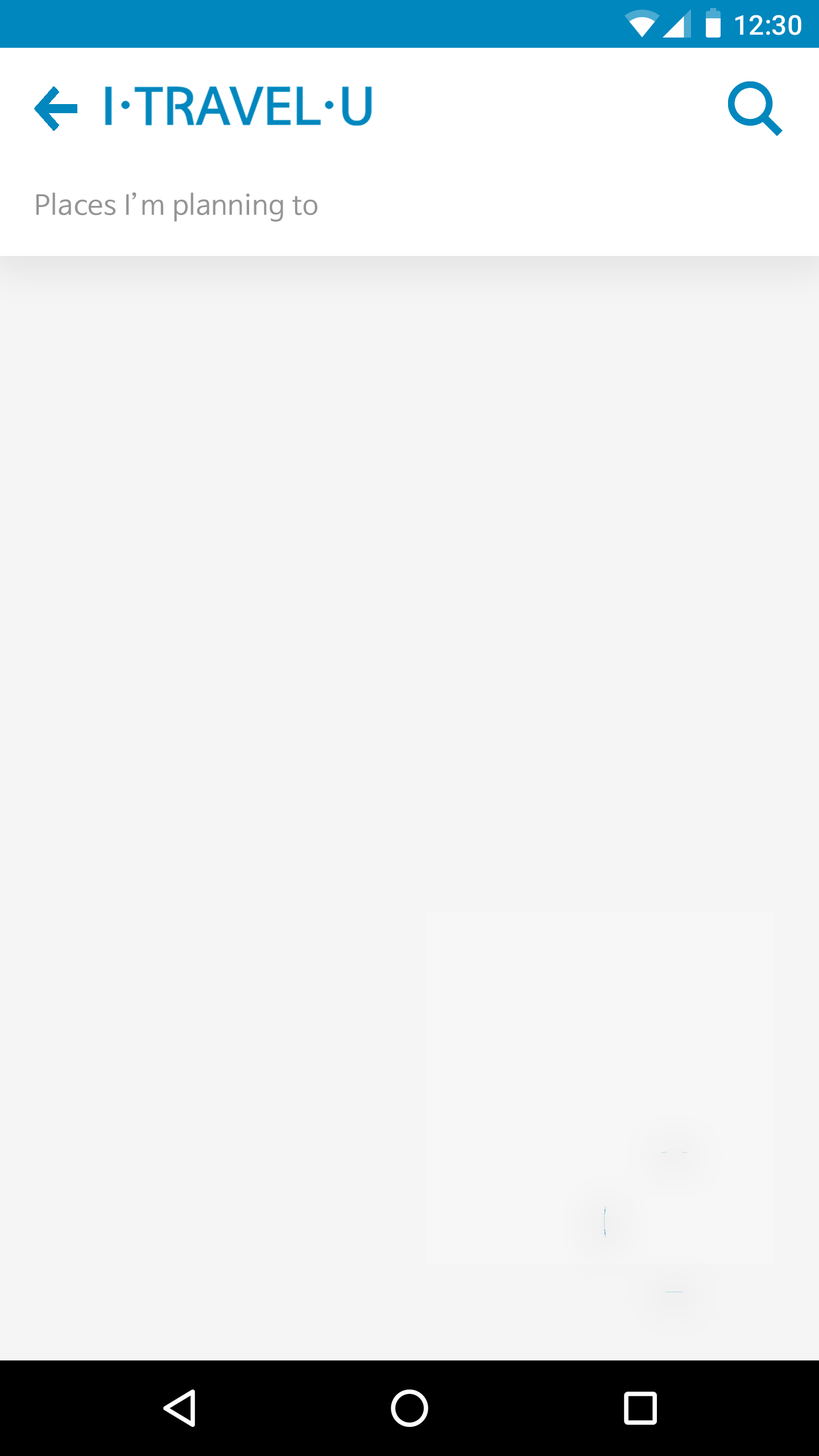
<style>
.page{position:relative;width:819px;height:1456px;background:#f5f5f5}
.page>*{position:absolute;margin:0}
.t1{font:27.3px "Roboto-Medium";color:#ffffff}
.t2{font:27.3px "NanumBarunGothicOTF";letter-spacing:0.025em;color:#959494}
</style>
<div class="page">
<p class="t1" style="left:735px;top:15px;width:66px;height:20px">12:30</p>
<p class="t2" style="left:36px;top:192px;width:281px;height:30px">Places I’m planning to</p>
</div>
